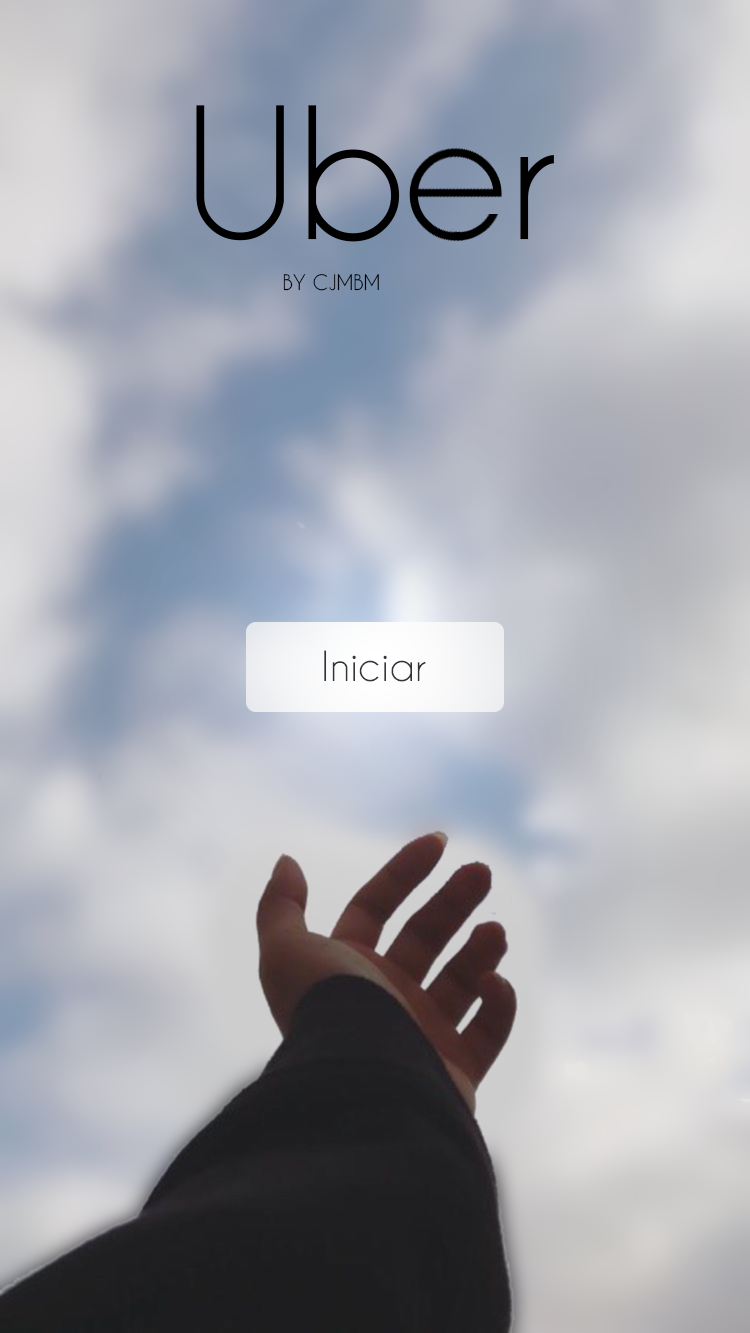
<style>
.page{position:relative;width:750px;height:1333px}
.page>*{position:absolute;margin:0}
.t1{font:20px "CaviarDreams";color:#000000}
.t2{font:39px "CaviarDreams";color:#353535}
</style>
<div class="page">
<p class="t1" style="left:283px;top:274px;width:96px;height:17px">BY CJMBM</p>
<p class="t2" style="left:324px;top:650px;width:102px;height:32px">Iniciar</p>
</div>
